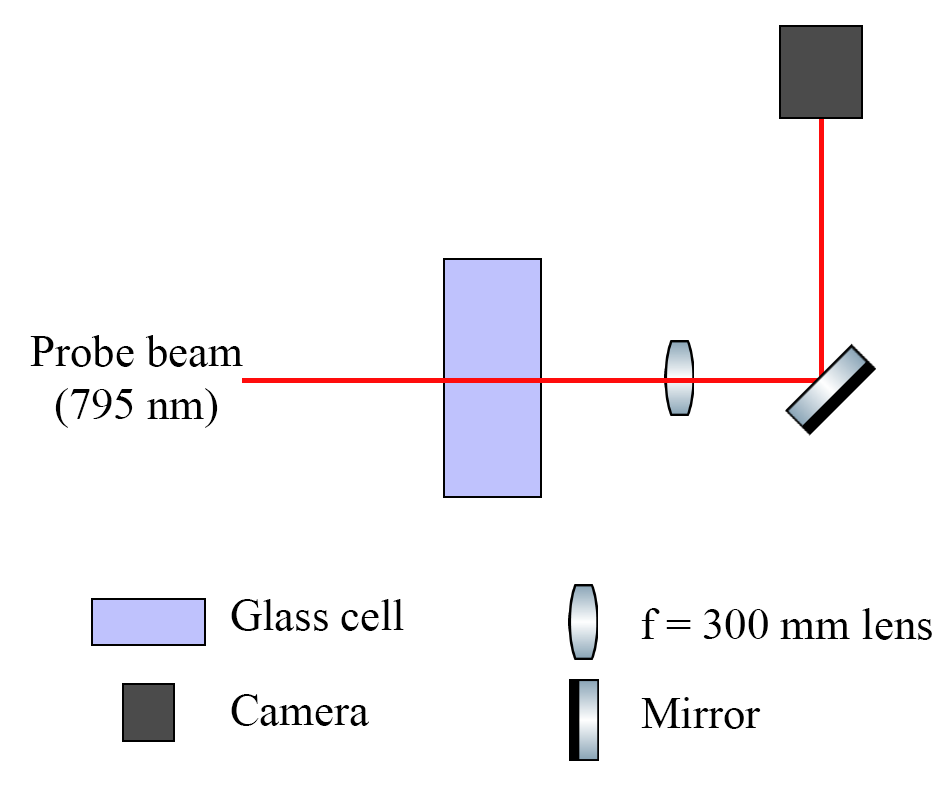
<style>
.page{position:relative;width:952px;height:811px;background:#ffffff}
.page>*{position:absolute;margin:0}
.t1{font:44.4px "TimesNewRomanPSMT";color:#000000}
</style>
<div class="page">
<p class="t1" style="left:30px;top:335px;width:213px;height:93px;text-align:center">Probe beam<br>(795 nm)</p>
<p class="t1" style="left:231px;top:599px;width:173px;height:32px">Glass cell</p>
<p class="t1" style="left:641px;top:608px;width:291px;height:32px">f = 300 mm lens</p>
<p class="t1" style="left:231px;top:694px;width:138px;height:32px">Camera</p>
<p class="t1" style="left:641px;top:697px;width:120px;height:32px">Mirror</p>
</div>
